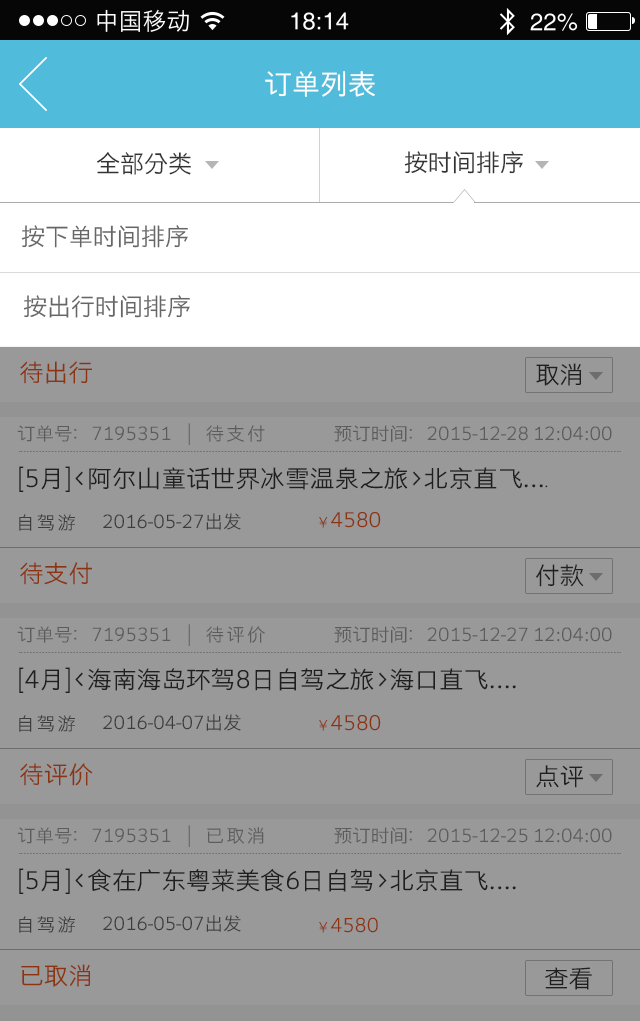
<style>
.page{position:relative;width:640px;height:1021px;background:#999999}
.page>*{position:absolute;margin:0}
.t1{font:28px "STHeitiSC-Light";color:#ffffff}
.t2{font:24px "STHeitiSC-Light";color:#333333}
.t3{font:24px "STHeitiSC-Light";color:#666666}
.t4{font:24px "STHeitiSC-Light";color:#8c3411;scale:1.03 1}
.t5{font:24px "STHeitiSC-Light";color:#333333;scale:1.03 1}
.t6{font:18px "STHeitiSC-Light";color:#5c5c5c;scale:1.03 1}
.t7{font:18px "STHeitiSC-Light";letter-spacing:0.12em;color:#5c5c5c;scale:1.03 1}
.t8{font:14px "MicrosoftYaHei";letter-spacing:0.12em;color:#333333;scale:1.03 1}
.t9{font:18px "STHeitiSC-Light";letter-spacing:0.12em;color:#3d3d3d;scale:1.03 1}
.t10{font:18px "STHeitiSC-Light";color:#3d3d3d;scale:1.03 1}
.t11{font:20px "STHeitiSC-Light";color:#8c3411;scale:1.03 1}
.t12{font:14px "STHeitiSC-Light";color:#8c3411;scale:1.03 1}
.t13{font:19px "STHeitiSC-Light";color:#8c3411;scale:1.03 1}
</style>
<div class="page">
<p class="t1" style="left:265px;top:71px;width:110px;height:26px">订单列表</p>
<p class="t2" style="left:97px;top:152px;width:94px;height:23px">全部分类</p>
<p class="t2" style="left:404px;top:151px;width:119px;height:23px">按时间排序</p>
<p class="t3" style="left:21px;top:225px;width:167px;height:23px">按下单时间排序</p>
<p class="t3" style="left:23px;top:295px;width:167px;height:23px">按出行时间排序</p>
<p class="t4" style="left:20px;top:361px;width:72px;height:23px">待出行</p>
<p class="t5" style="left:536px;top:363px;width:45px;height:23px">取消</p>
<p class="t6" style="left:17px;top:423px;width:595px;height:22px">订单号：7195351 <span class="t7">  |  待支付   </span>             预订时间：2015-12-28 12:04:00</p>
<p class="t5" style="left:19px;top:466px;width:529px;height:26px">[5月]&lt;阿尔山童话世界冰雪温泉之旅&gt;北京直飞...<span class="t8">.</span></p>
<p class="t9" style="left:19px;top:514px;width:56px;height:17px">自驾游</p>
<p class="t10" style="left:103px;top:513px;width:138px;height:17px">2016-05-27出发</p>
<p class="t11" style="left:319px;top:512px;width:62px;height:16px"><span class="t12">￥</span>4580</p>
<p class="t4" style="left:20px;top:562px;width:72px;height:23px">待支付</p>
<p class="t5" style="left:536px;top:564px;width:48px;height:23px">付款</p>
<p class="t6" style="left:17px;top:624px;width:595px;height:22px">订单号：7195351 <span class="t7">  |  待评价   </span>             预订时间：2015-12-27 12:04:00</p>
<p class="t5" style="left:19px;top:667px;width:497px;height:26px">[4月]&lt;海南海岛环驾8日自驾之旅&gt;海口直飞....</p>
<p class="t9" style="left:19px;top:715px;width:56px;height:17px">自驾游</p>
<p class="t10" style="left:103px;top:714px;width:138px;height:17px">2016-04-07出发</p>
<p class="t11" style="left:319px;top:715px;width:62px;height:16px"><span class="t12">￥</span>4580</p>
<p class="t4" style="left:20px;top:763px;width:73px;height:23px">待评价</p>
<p class="t5" style="left:536px;top:765px;width:47px;height:23px">点评</p>
<p class="t6" style="left:17px;top:825px;width:595px;height:22px">订单号：7195351 <span class="t7">  |  已取消   </span>             预订时间：2015-12-25 12:04:00</p>
<p class="t5" style="left:19px;top:868px;width:497px;height:26px">[5月]&lt;食在广东粤菜美食6日自驾&gt;北京直飞....</p>
<p class="t9" style="left:19px;top:916px;width:56px;height:17px">自驾游</p>
<p class="t10" style="left:103px;top:915px;width:138px;height:17px">2016-05-07出发</p>
<p class="t13" style="left:319px;top:917px;width:59px;height:16px"><span class="t12">￥</span>4580</p>
<p class="t4" style="left:21px;top:964px;width:69px;height:23px">已取消</p>
<p class="t5" style="left:545px;top:967px;width:47px;height:23px">查看</p>
</div>
